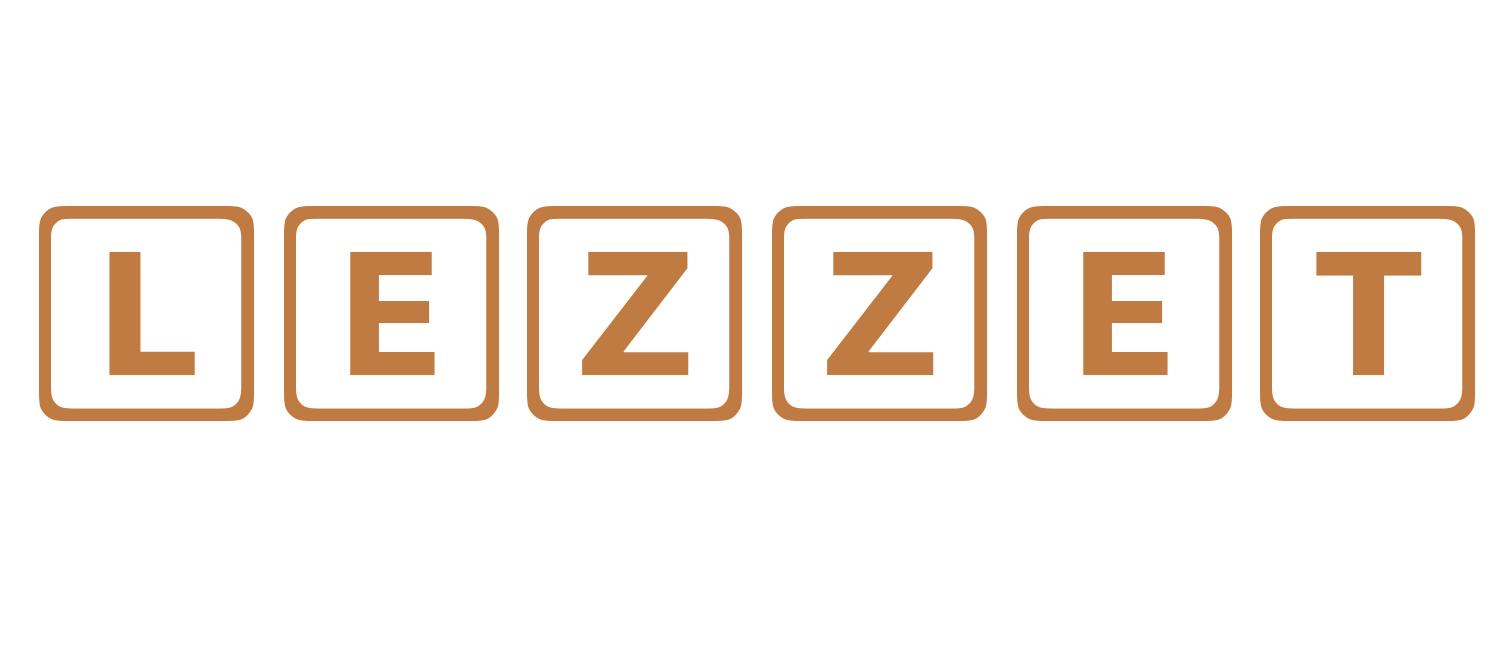
<style>
.page{position:relative;width:1512px;height:659px;background:#ffffff}
.page>*{position:absolute;margin:0}
.t1{font:260px "TINspireKeysCX";color:#c07b42}
</style>
<div class="page">
<p class="t1" style="left:39px;top:205px;width:1437px;height:216px">LEZZET</p>
</div>
